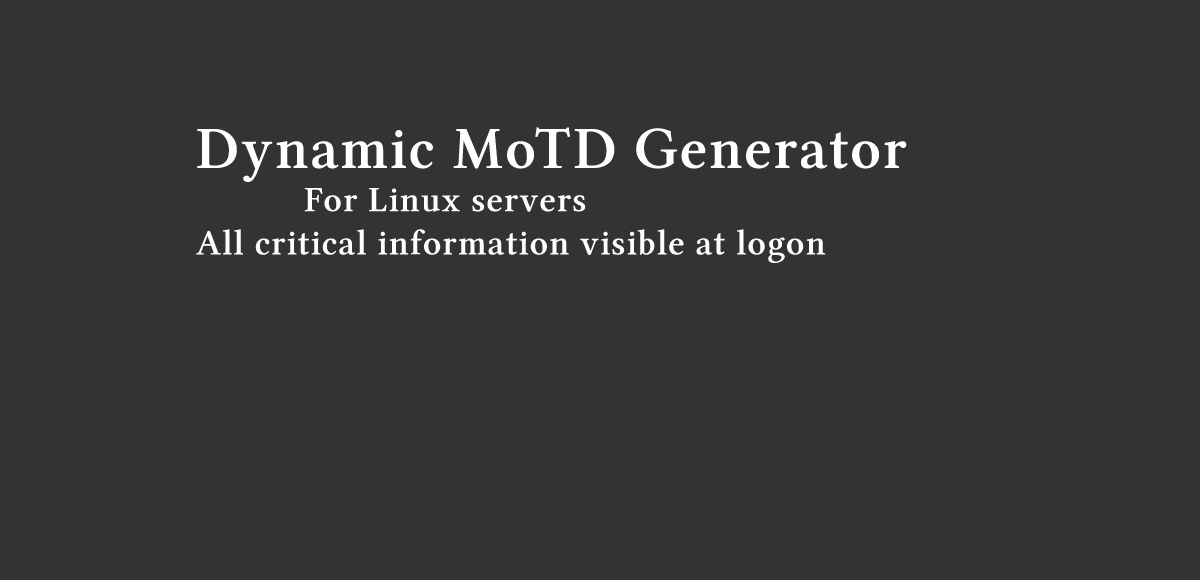
<style>
.page{position:relative;width:1200px;height:580px;background:#333333}
.page>*{position:absolute;margin:0}
.t1{font:36px "LinuxLibertineGZ";letter-spacing:0.025em;color:#fefefa}
.t2{font:60px "LinuxLibertineGZ";letter-spacing:0.025em;color:#fefefa}
</style>
<div class="page">
<p class="t1" style="left:196px;top:127px;width:711px;height:136px"><span class="t2">Dynamic MoTD Generator<br></span>   For Linux servers<br>All critical information visible at logon</p>
</div>
